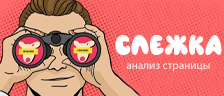
<style>
.page{position:relative;width:224px;height:96px}
.page>*{position:absolute;margin:0}
.t1{font:28.5px "Airfool";color:#ffffff}
.t2{font:11.3px "MyriadPro-Regular";color:#eeeeee}
</style>
<div class="page">
<p class="t1" style="left:115px;top:35px;width:107px;height:20px">слежка</p>
<p class="t2" style="left:126px;top:63px;width:84px;height:9px">анализ страницы</p>
</div>
